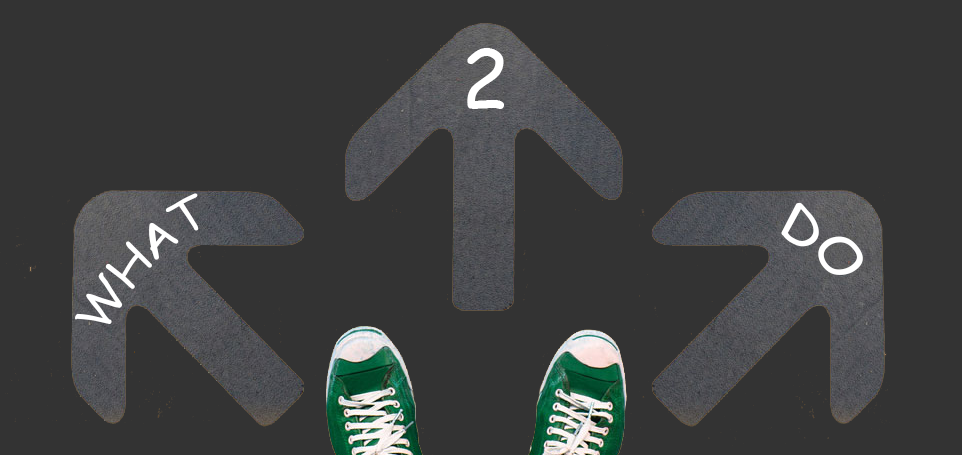
<style>
.page{position:relative;width:962px;height:455px;background:#333333}
.page>*{position:absolute;margin:0}
.t1{font:80px "ComicSansMS";color:#ffffff}
.t2{font:45px "ComicSansMS";color:#ffffff}
.t3{font:50px "ComicSansMS";color:#ffffff}
</style>
<div class="page">
<p class="t1" style="left:467px;top:48px;width:37px;height:61px">2</p>
<p class="t2" style="left:75px;top:193px;width:124px;height:131px;rotate:-46deg">WHAT</p>
<p class="t3" style="left:781px;top:202px;width:82px;height:73px;rotate:39deg">DO</p>
</div>
